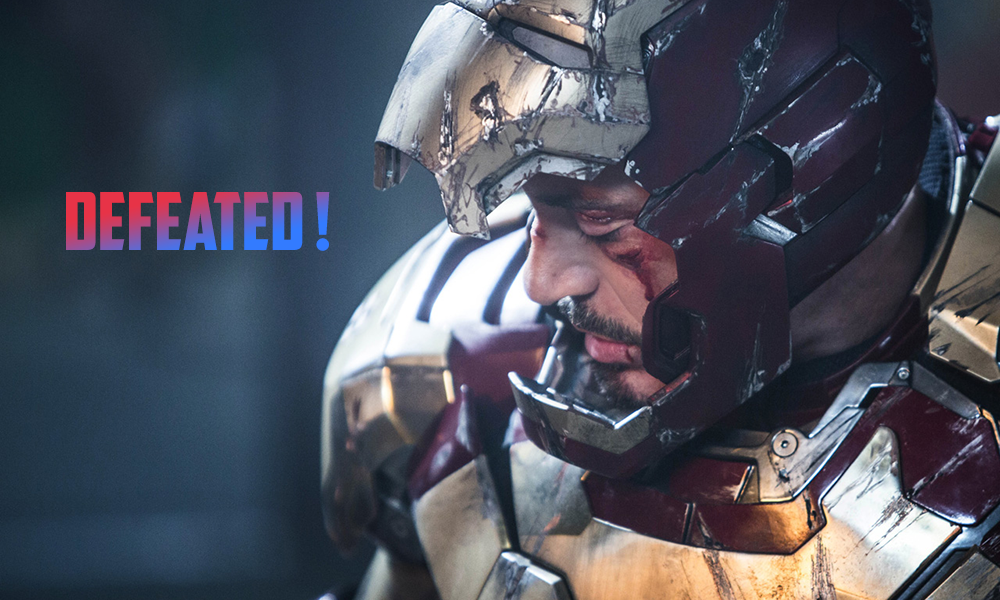
<style>
.page{position:relative;width:1000px;height:600px}
.page>*{position:absolute;margin:0}
.t1{font:80px "AmericanCaptain"}
</style>
<div class="page">
<p class="t1" style="left:66px;top:192px;width:264px;height:59px">DEFEATED !</p>
</div>
